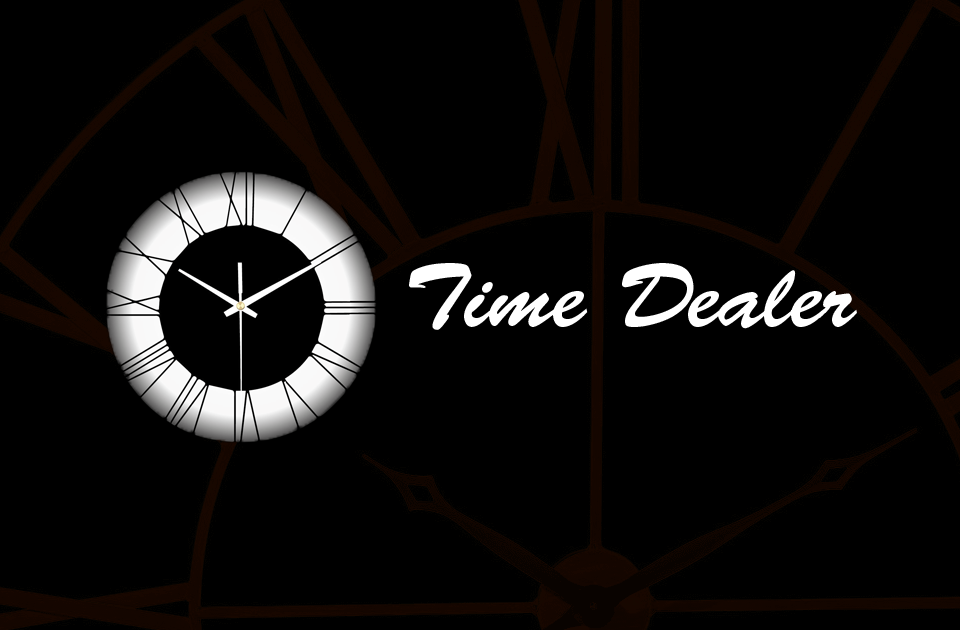
<style>
.page{position:relative;width:960px;height:630px;background:#000000}
.page>*{position:absolute;margin:0}
.t1{font:90.1px "BrushScriptStd";color:#ffffff}
</style>
<div class="page">
<p class="t1" style="left:409px;top:263px;width:448px;height:67px">Time Dealer</p>
</div>
